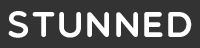
<style>
.page{position:relative;width:200px;height:48px;background:#333333}
.page>*{position:absolute;margin:0}
.t1{font:36px "Multicolore";letter-spacing:0.05em;color:#ffffff}
</style>
<div class="page">
<p class="t1" style="left:8px;top:11px;width:184px;height:27px">STUNNED</p>
</div>
